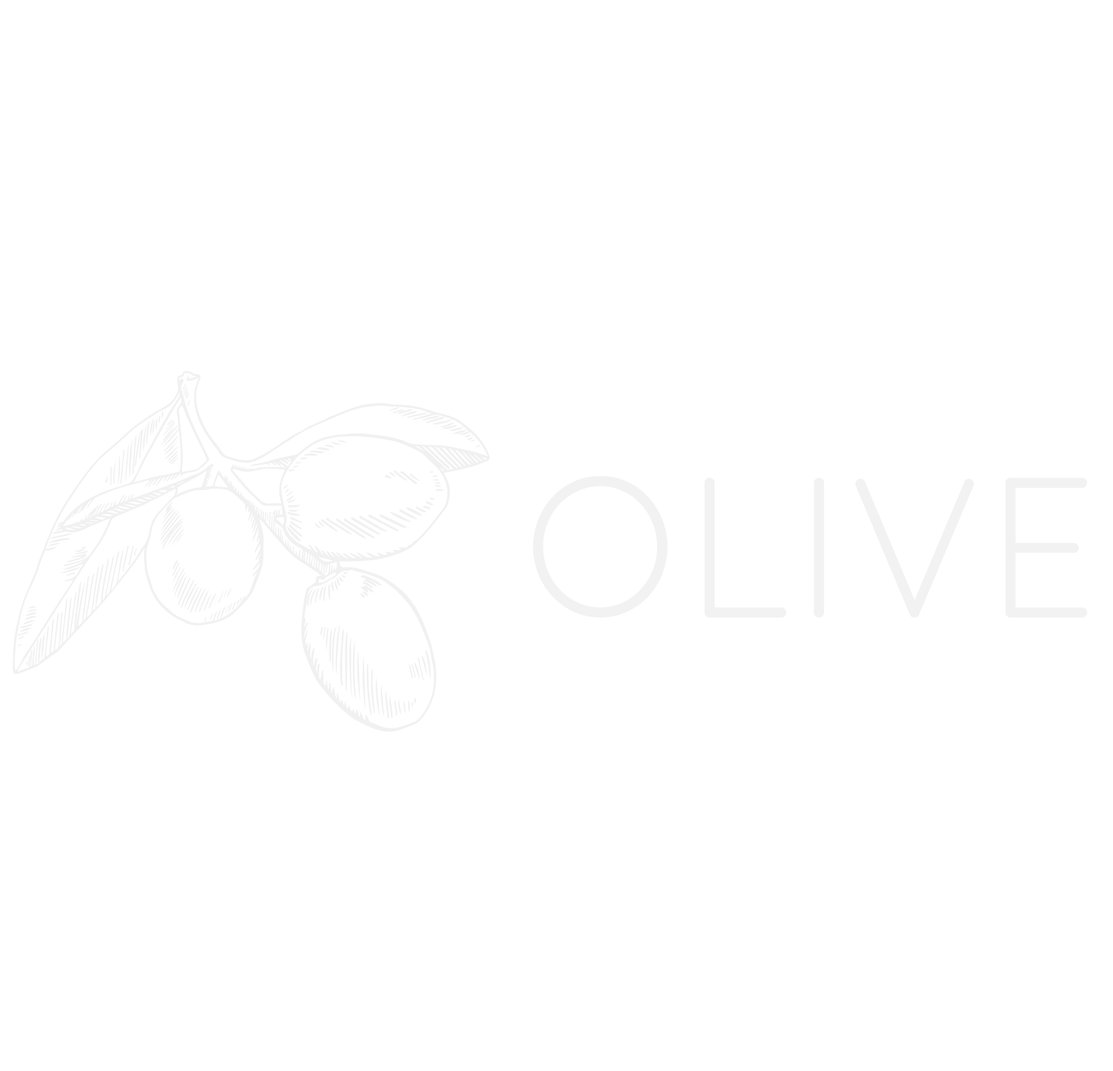
<style>
.page{position:relative;width:1113px;height:1071px;background:#ffffff}
.page>*{position:absolute;margin:0}
.t1{font:284.4px "Quicksand-Regular";color:#f2f2f2;font-variant:small-caps}
</style>
<div class="page">
<p class="t1" style="left:533px;top:476px;width:554px;height:142px">olive</p>
</div>
